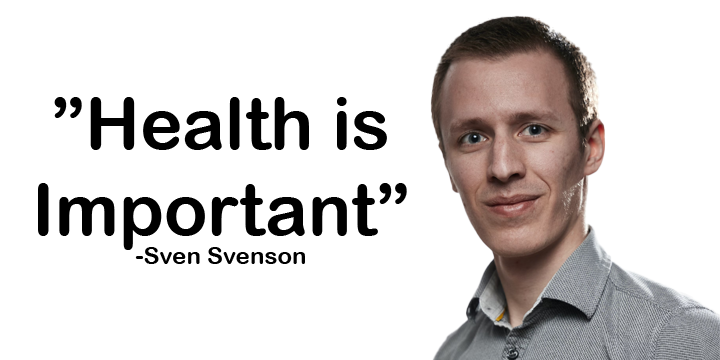
<style>
.page{position:relative;width:720px;height:360px;background:#ffffff}
.page>*{position:absolute;margin:0}
.t1{font:72px "ArialRoundedMTBold";color:#000000}
.t2{font:24px "ArialRoundedMTBold";color:#000000}
</style>
<div class="page">
<p class="t1" style="left:38px;top:97px;width:369px;height:167px;text-align:center">”Health is<br>Important”<br><span class="t2">-Sven Svenson</span></p>
</div>
